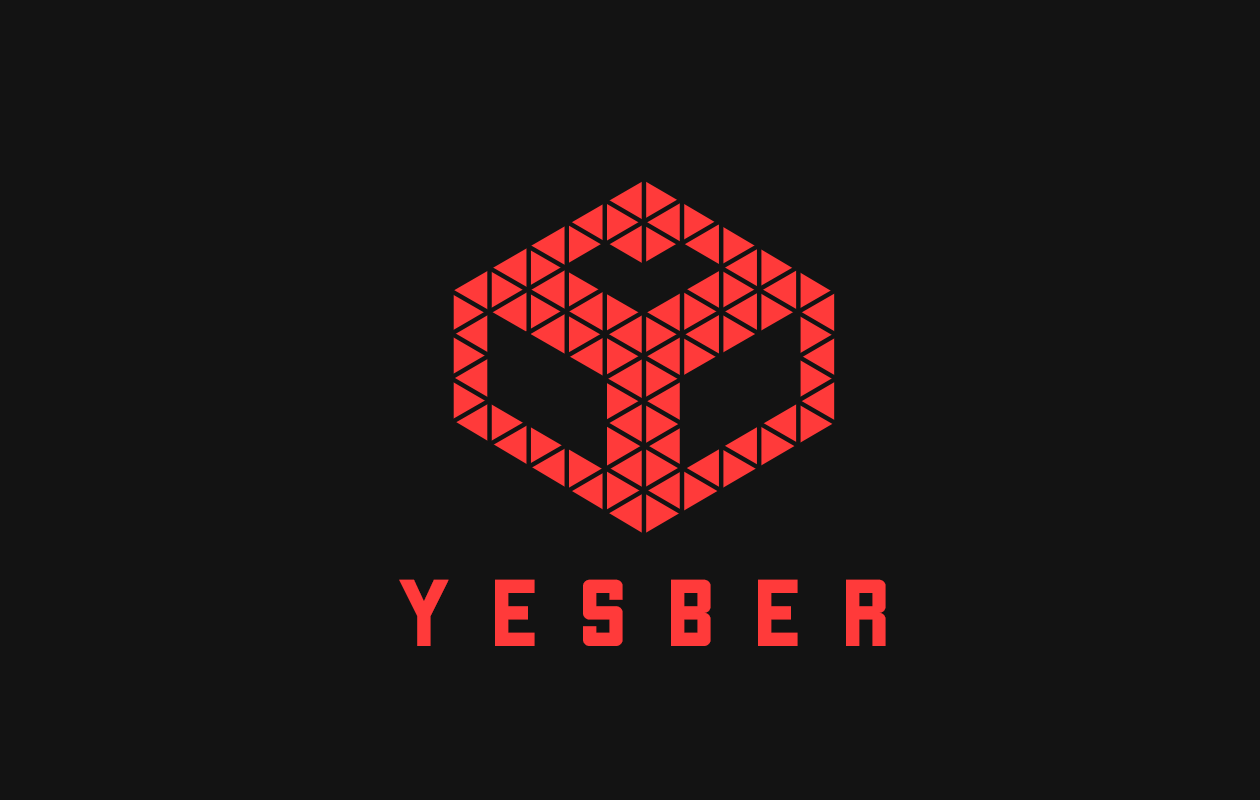
<style>
.page{position:relative;width:1260px;height:800px;background:#131313}
.page>*{position:absolute;margin:0}
.t1{font:91.9px "Cornerstone";letter-spacing:0.38em;color:#ff3a3a;text-transform:uppercase}
</style>
<div class="page">
<p class="t1" style="left:399px;top:579px;width:487px;height:67px">YESBER</p>
</div>
